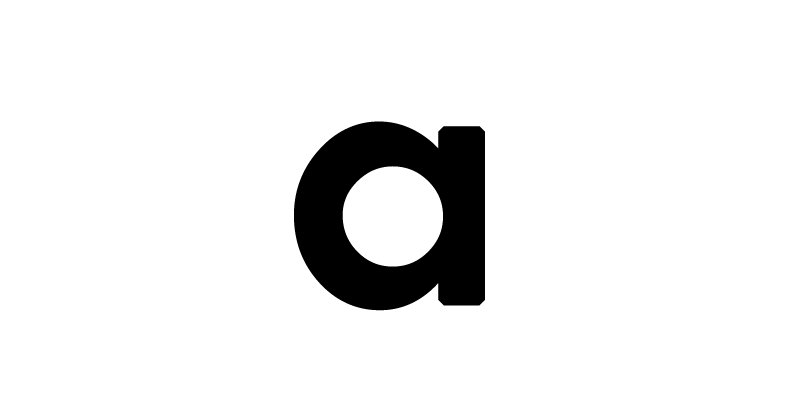
<style>
.page{position:relative;width:800px;height:400px;background:#ffffff}
.page>*{position:absolute;margin:0}
.t1{font:416.7px "TwCenMT-Regular";color:#000000;font-weight:bold}
</style>
<div class="page">
<p class="t1" style="left:294px;top:121px;width:191px;height:190px">a</p>
</div>
